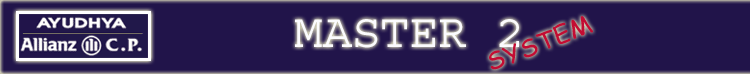
<style>
.page{position:relative;width:750px;height:74px;background:#21144a}
.page>*{position:absolute;margin:0}
.t1{font:24px "ComicSansMS";color:#c30c33;scale:1.1 1}
.t2{font:48px "Courier";color:#fbfbfd}
</style>
<div class="page">
<p class="t1" style="left:489px;top:16px;width:104px;height:54px;rotate:-21deg">SYSTEM</p>
<p class="t2" style="left:295px;top:19px;width:224px;height:29px">MASTER 2</p>
</div>
